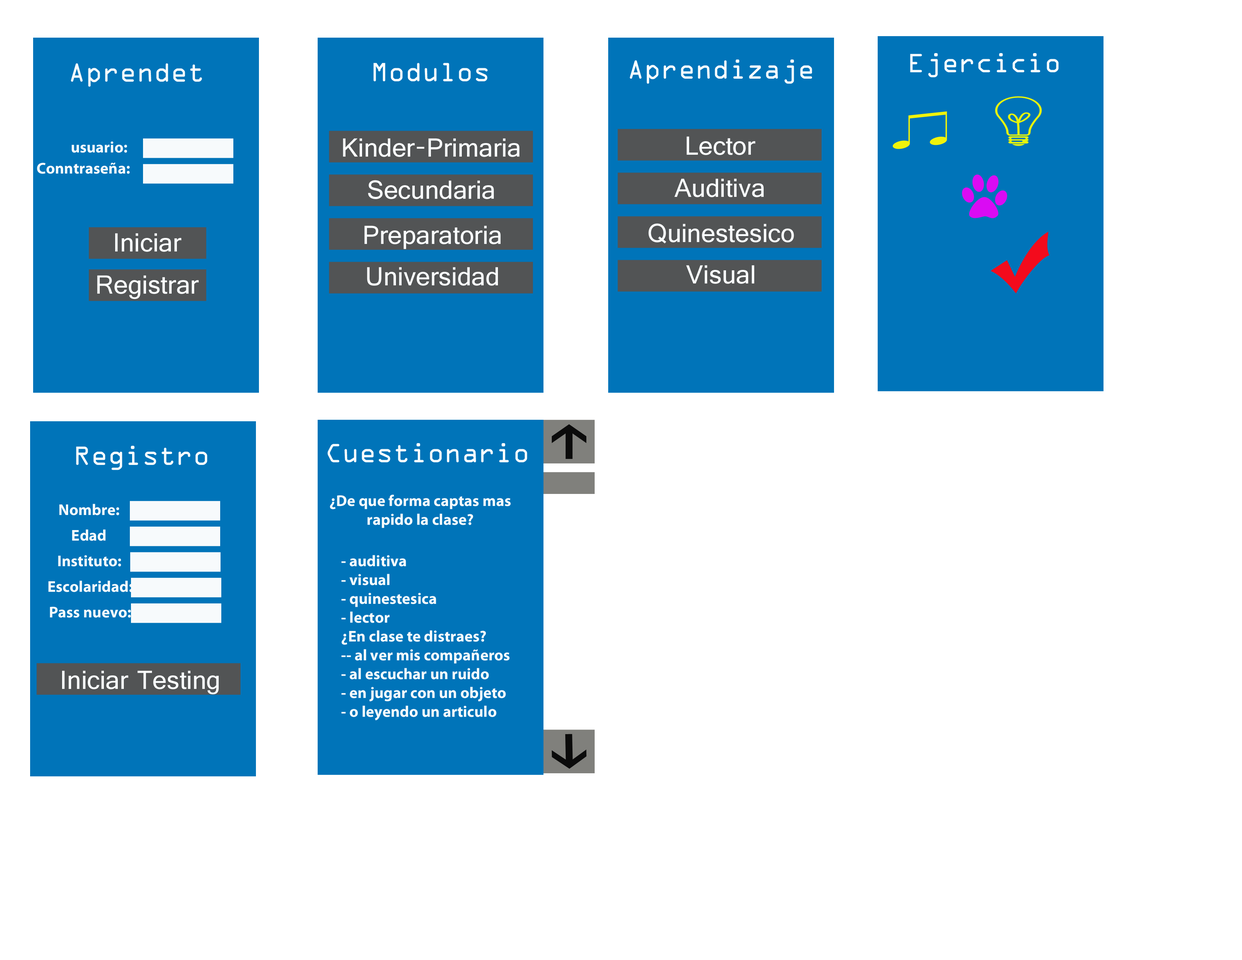
<style>
.page{position:relative;width:1242px;height:960px;background:#ffffff}
.page>*{position:absolute;margin:0}
.t1{font:28.2px "OCRAExtended";color:#fafdfe}
.t2{font:28.2px "OCRAExtended";color:#f8fbfc}
.t3{font:28.2px "Raavi";color:#fafdfe}
.t4{font:15.7px "MyriadPro-Bold";color:#f8fbfc}
</style>
<div class="page">
<p class="t1" style="left:910px;top:53px;width:149px;height:25px">Ejercicio</p>
<p class="t2" style="left:71px;top:63px;width:131px;height:24px">Aprendet</p>
<p class="t1" style="left:373px;top:63px;width:115px;height:18px">Modulos</p>
<p class="t1" style="left:630px;top:59px;width:182px;height:25px">Aprendizaje</p>
<p class="t3" style="left:687px;top:136px;width:69px;height:19px">Lector</p>
<p class="t4" style="left:72px;top:141px;width:55px;height:12px">usuario:</p>
<p class="t3" style="left:343px;top:138px;width:176px;height:19px">Kinder-Primaria</p>
<p class="t4" style="left:37px;top:163px;width:93px;height:11px">Conntraseña:</p>
<p class="t3" style="left:368px;top:180px;width:126px;height:19px">Secundaria</p>
<p class="t3" style="left:675px;top:178px;width:89px;height:19px">Auditiva</p>
<p class="t3" style="left:115px;top:233px;width:66px;height:19px">Iniciar</p>
<p class="t3" style="left:364px;top:225px;width:137px;height:24px">Preparatoria</p>
<p class="t3" style="left:649px;top:223px;width:145px;height:21px">Quinestesico</p>
<p class="t3" style="left:367px;top:267px;width:131px;height:19px">Universidad</p>
<p class="t3" style="left:686px;top:265px;width:68px;height:19px">Visual</p>
<p class="t3" style="left:97px;top:275px;width:102px;height:24px">Registrar</p>
<p class="t1" style="left:76px;top:446px;width:131px;height:24px">Registro</p>
<p class="t1" style="left:327px;top:443px;width:200px;height:19px">Cuestionario</p>
<p class="t4" style="left:330px;top:495px;width:181px;height:33px;text-align:center">¿De que forma captas mas rapido la clase?</p>
<p class="t4" style="left:59px;top:504px;width:60px;height:11px">Nombre:</p>
<p class="t4" style="left:72px;top:529px;width:34px;height:12px">Edad</p>
<p class="t4" style="left:58px;top:555px;width:63px;height:12px">Instituto:</p>
<p class="t4" style="left:341px;top:555px;width:169px;height:165px">- auditiva<br>- visual<br>- quinestesica<br>- lector<br>¿En clase te distraes?<br>-- al ver mis compañeros<br>- al escuchar un ruido<br>- en jugar con un objeto<br>- o leyendo un articulo</p>
<p class="t4" style="left:48px;top:580px;width:85px;height:12px">Escolaridad:</p>
<p class="t4" style="left:50px;top:606px;width:81px;height:12px">Pass nuevo:</p>
<p class="t3" style="left:62px;top:670px;width:157px;height:25px">Iniciar Testing</p>
</div>
